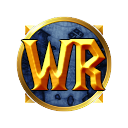
<style>
.page{position:relative;width:128px;height:128px;background:#ffffff}
.page>*{position:absolute;margin:0}
.t1{font:72px "LifeCraft"}
</style>
<div class="page">
<p class="t1" style="left:21px;top:39px;width:85px;height:51px">WR</p>
</div>
